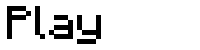
<style>
.page{position:relative;width:200px;height:50px;background:#ffffff}
.page>*{position:absolute;margin:0}
.t1{font:37.5px "Minecraftia-Regular";color:#000000}
</style>
<div class="page">
<p class="t1" style="left:7px;top:6px;width:94px;height:38px">Play</p>
</div>
